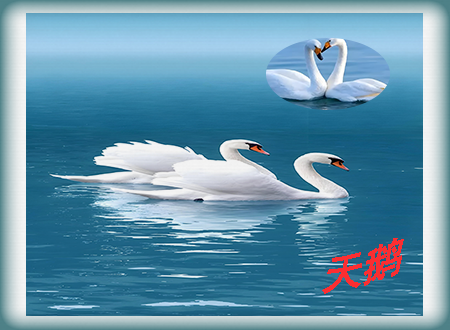
<style>
.page{position:relative;width:450px;height:330px}
.page>*{position:absolute;margin:0}
.t1{font:40px "SimHei";color:#f6291f;font-style:italic}
</style>
<div class="page">
<p class="t1" style="left:322px;top:238px;width:82px;height:56px">天鹅</p>
</div>
